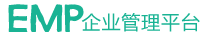
<style>
.page{position:relative;width:200px;height:36px;background:#ffffff}
.page>*{position:absolute;margin:0}
.t1{font:40px "Bizon";color:#1ab394}
.t2{font:19px "MicrosoftYaHei";letter-spacing:0.04em;color:#1ab394}
</style>
<div class="page">
<p class="t1" style="left:8px;top:4px;width:76px;height:28px">EMP</p>
<p class="t2" style="left:81px;top:13px;width:119px;height:19px">企业管理平台</p>
</div>
